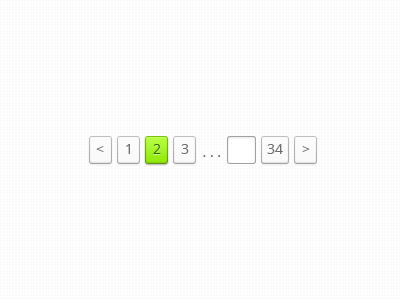
<style>
.page{position:relative;width:400px;height:300px;background:#ffffff}
.page>*{position:absolute;margin:0}
.t1{font:14px "OpenSans";color:#6e6e6e}
.t2{font:14px "OpenSans";color:#2a6900}
</style>
<div class="page">
<p class="t1" style="left:96px;top:146px;width:8px;height:6px">&lt;</p>
<p class="t1" style="left:126px;top:144px;width:4px;height:10px">1</p>
<p class="t2" style="left:153px;top:144px;width:8px;height:10px">2</p>
<p class="t1" style="left:181px;top:144px;width:8px;height:10px">3</p>
<p class="t1" style="left:267px;top:144px;width:16px;height:10px">34</p>
<p class="t1" style="left:302px;top:146px;width:8px;height:6px">&gt;</p>
<p class="t1" style="left:203px;top:155px;width:17px;height:2px">. . .</p>
</div>
